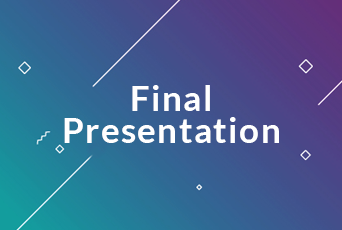
<style>
.page{position:relative;width:342px;height:230px}
.page>*{position:absolute;margin:0}
.t1{font:35px/32px "Lato-Bold";letter-spacing:0.04em;color:#ffffff}
</style>
<div class="page">
<p class="t1" style="left:64px;top:85px;width:215px;height:58px;text-align:center">Final <br>Presentation</p>
</div>
